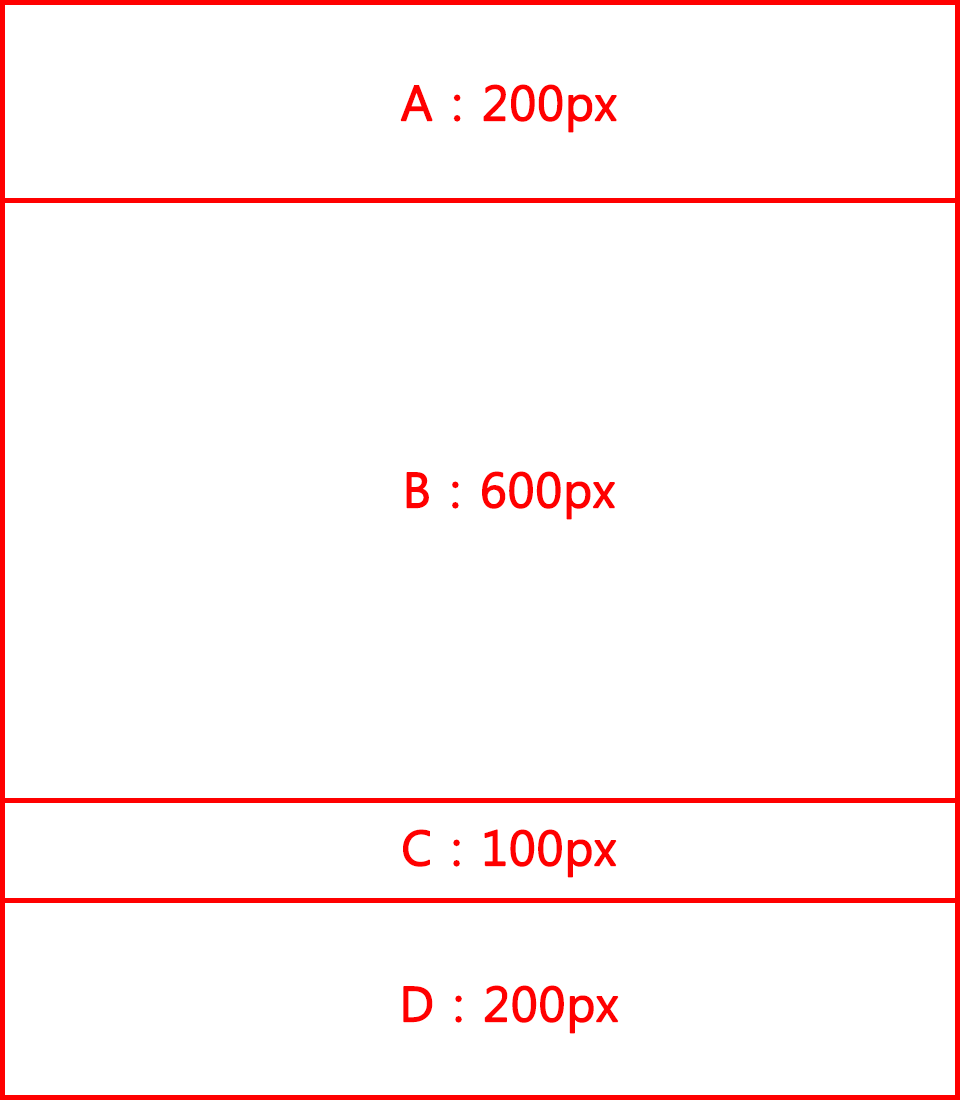
<style>
.page{position:relative;width:960px;height:1100px;background:#ffffff}
.page>*{position:absolute;margin:0}
.t1{font:48px "MalgunGothicRegular";color:#ff0000;font-weight:bold}
</style>
<div class="page">
<p class="t1" style="left:400px;top:84px;width:217px;height:49px">A : 200px</p>
<p class="t1" style="left:406px;top:471px;width:209px;height:49px">B : 600px</p>
<p class="t1" style="left:403px;top:829px;width:214px;height:49px">C : 100px</p>
<p class="t1" style="left:403px;top:985px;width:216px;height:49px">D : 200px</p>
</div>
